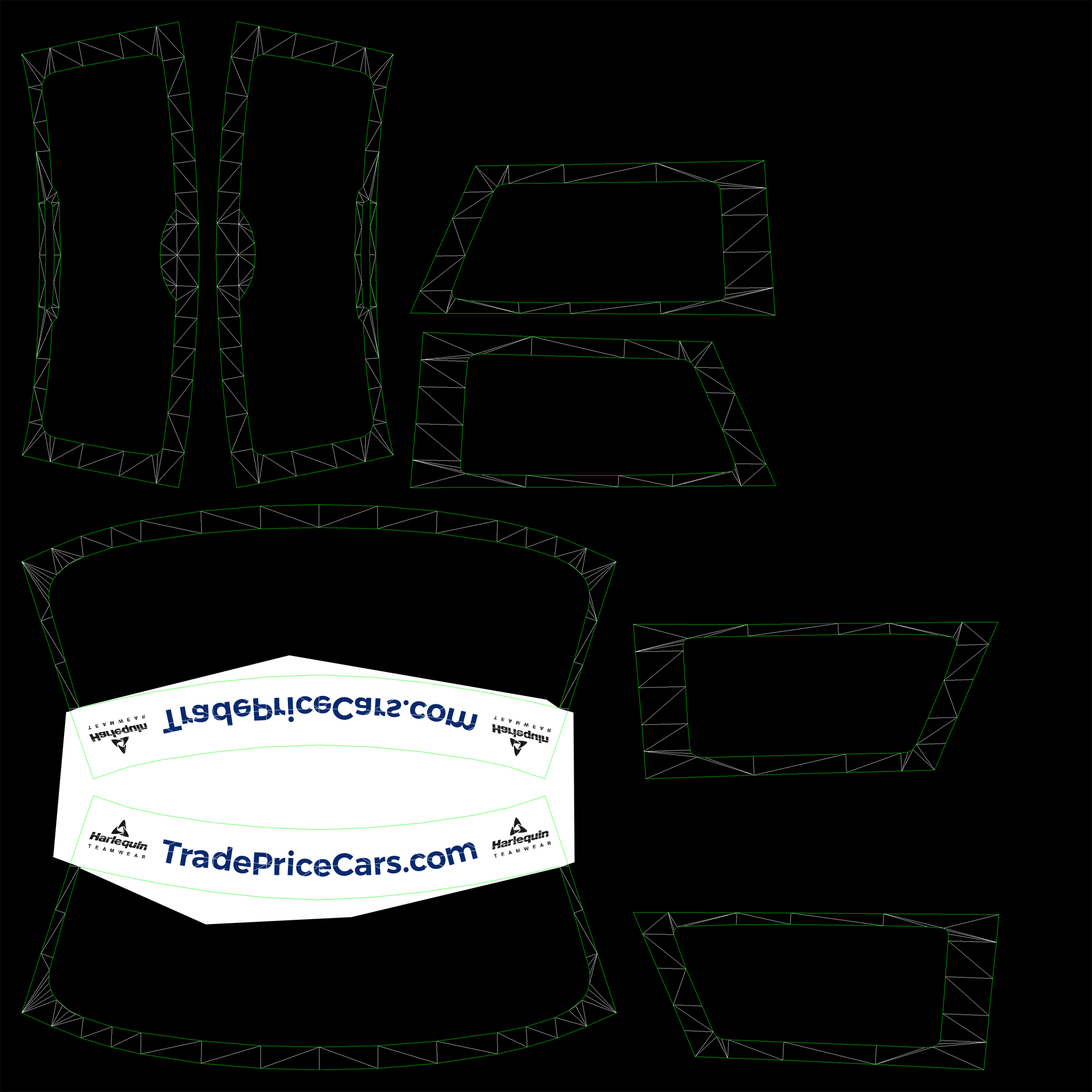
<style>
.page{position:relative;width:1092px;height:1092px;background:#000000}
.page>*{position:absolute;margin:0}
.t1{font:32px "TruenoSBd";color:#09296d}
</style>
<div class="page">
<p class="t1" style="left:163px;top:696px;width:315px;height:38px">TradePriceCars.com</p>
<p class="t1" style="left:163px;top:839px;width:315px;height:38px">TradePriceCars.com</p>
</div>
